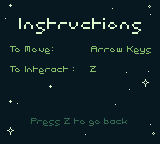
<style>
.page{position:relative;width:160px;height:144px;background:#071821}
.page>*{position:absolute;margin:0}
.t1{font:14.6px "Pixel";color:#e0f8cf}
.t2{font:8.3px "Pixel";color:#86c06c}
.t3{font:8.3px "Pixel";color:#306850}
</style>
<div class="page">
<p class="t1" style="left:19px;top:18px;width:122px;height:16px">Instructions</p>
<p class="t2" style="left:10px;top:46px;width:141px;height:28px">To Move:            Arrow Keys<br><br>To Interact :     Z</p>
<p class="t3" style="left:31px;top:118px;width:96px;height:8px">Press Z to go back</p>
</div>
